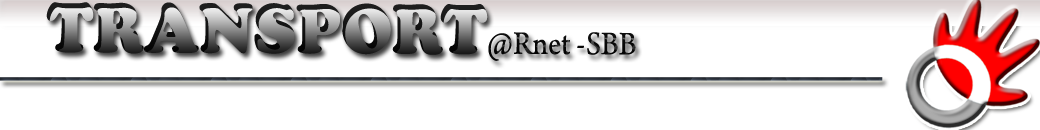
<style>
.page{position:relative;width:1040px;height:130px;background:#ffffff}
.page>*{position:absolute;margin:0}
.t1{font:34.4px "ArnoPro-Regular";scale:0.91 1}
.t2{font:72.6px "CooperBlack";scale:0.91 1}
</style>
<div class="page">
<p class="t1" style="left:46px;top:2px;width:590px;height:59px"><span class="t2">T</span><span class="t2">R</span><span class="t2">ANSPOR</span><span class="t2">T</span>@Rnet -SBB</p>
</div>
